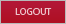
<style>
.page{position:relative;width:66px;height:24px}
.page>*{position:absolute;margin:0}
.t1{font:10px "MyriadPro-Regular";color:#ebc2c9;text-transform:uppercase}
</style>
<div class="page">
<p class="t1" style="left:15px;top:8px;width:37px;height:7px">LOGOUT</p>
</div>
